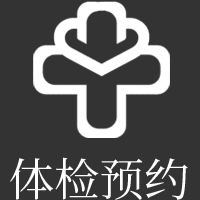
<style>
.page{position:relative;width:200px;height:200px;background:#333333}
.page>*{position:absolute;margin:0}
.t1{font:45.1px "SourceHanSerifCN-Regular";color:#fffefe}
</style>
<div class="page">
<p class="t1" style="left:10px;top:157px;width:178px;height:43px">体检预约</p>
</div>
